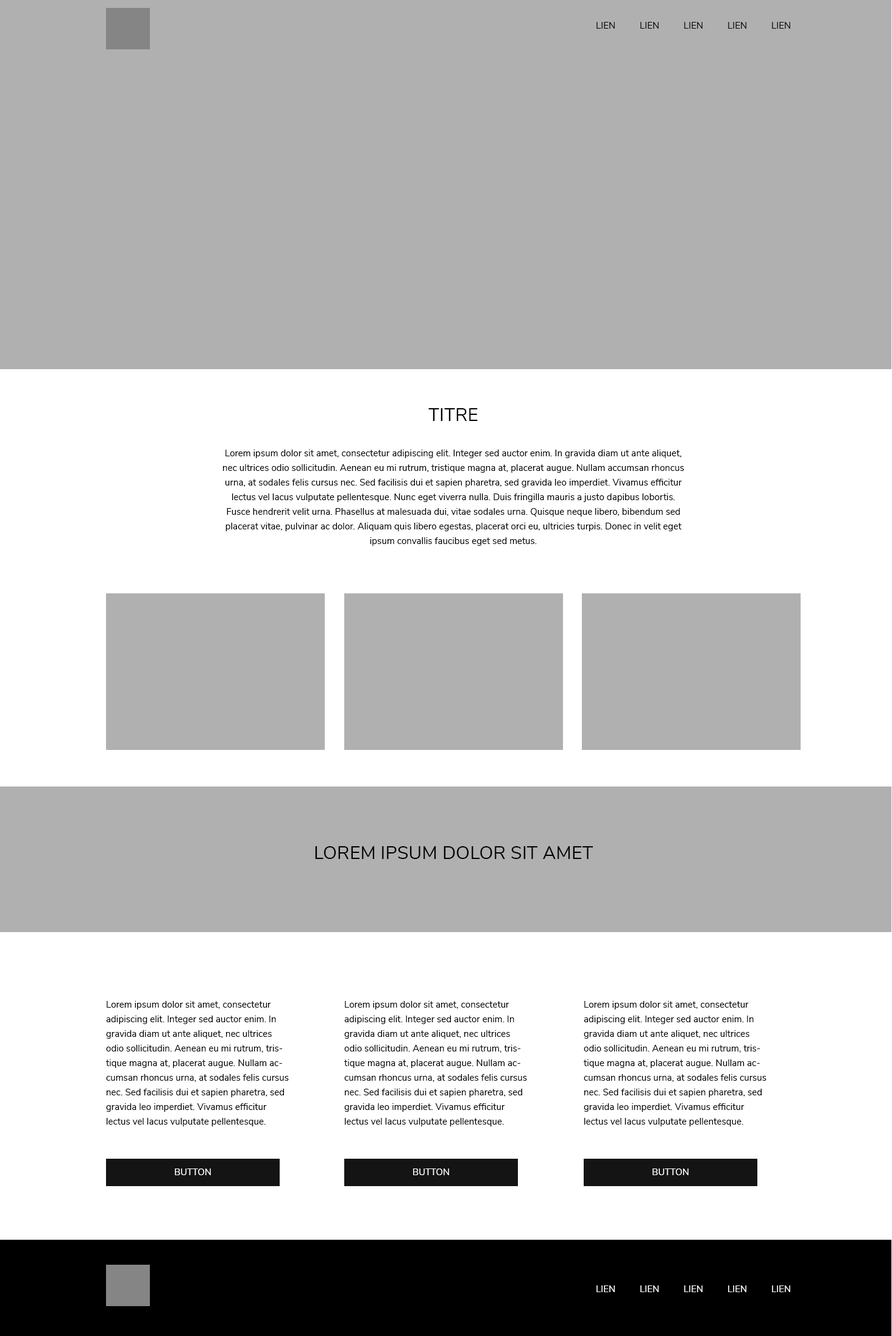
<style>
.page{position:relative;width:892px;height:1336px;background:#b0b0b0}
.page>*{position:absolute;margin:0}
.t1{font:9.1px "NunitoSans-Regular";letter-spacing:0.005em;color:#000000}
.t2{font:18.3px "NunitoSans-Regular";letter-spacing:0.005em;color:#000000}
.t3{font:9.1px/14.6px "NunitoSans-Regular";letter-spacing:0.005em;color:#000000}
.t4{font:9.3px "NunitoSans-Regular";letter-spacing:0.005em;color:#ffffff}
.t5{font:9.1px "NunitoSans-Regular";letter-spacing:0.005em;color:#ffffff}
</style>
<div class="page">
<p class="t1" style="left:597px;top:22px;width:193px;height:7px">LIEN   LIEN  LIEN  LIEN  LIEN</p>
<p class="t2" style="left:428px;top:408px;width:50px;height:13px">TITRE</p>
<p class="t3" style="left:223px;top:450px;width:461px;height:96px;text-align:center">Lorem ipsum dolor sit amet, consectetur adipiscing elit. Integer sed auctor enim. In gravida diam ut ante aliquet, nec ultrices odio sollicitudin. Aenean eu mi rutrum, tristique magna at, placerat augue. Nullam accumsan rhoncus urna, at sodales felis cursus nec. Sed facilisis dui et sapien pharetra, sed gravida leo imperdiet. Vivamus efficitur lectus vel lacus vulputate pellentesque. Nunc eget viverra nulla. Duis fringilla mauris a justo dapibus lobortis. Fusce hendrerit velit urna. Phasellus at malesuada dui, vitae sodales urna. Quisque neque libero, bibendum sed placerat vitae, pulvinar ac dolor. Aliquam quis libero egestas, placerat orci eu, ultricies turpis. Donec in velit eget ipsum convallis faucibus eget sed metus.</p>
<p class="t2" style="left:315px;top:847px;width:279px;height:12px">LOREM IPSUM DOLOR SIT AMET</p>
<p class="t3" style="left:106px;top:1001px;width:183px;height:126px">Lorem ipsum dolor sit amet, consectetur adipiscing elit. Integer sed auctor enim. In gravida diam ut ante aliquet, nec ultrices odio sollicitudin. Aenean eu mi rutrum, tristique magna at, placerat augue. Nullam accumsan rhoncus urna, at sodales felis cursus nec. Sed facilisis dui et sapien pharetra, sed gravida leo imperdiet. Vivamus efficitur lectus vel lacus vulputate pellentesque.</p>
<p class="t3" style="left:344px;top:1001px;width:183px;height:126px">Lorem ipsum dolor sit amet, consectetur adipiscing elit. Integer sed auctor enim. In gravida diam ut ante aliquet, nec ultrices odio sollicitudin. Aenean eu mi rutrum, tristique magna at, placerat augue. Nullam accumsan rhoncus urna, at sodales felis cursus nec. Sed facilisis dui et sapien pharetra, sed gravida leo imperdiet. Vivamus efficitur lectus vel lacus vulputate pellentesque.</p>
<p class="t3" style="left:584px;top:1001px;width:183px;height:126px">Lorem ipsum dolor sit amet, consectetur adipiscing elit. Integer sed auctor enim. In gravida diam ut ante aliquet, nec ultrices odio sollicitudin. Aenean eu mi rutrum, tristique magna at, placerat augue. Nullam accumsan rhoncus urna, at sodales felis cursus nec. Sed facilisis dui et sapien pharetra, sed gravida leo imperdiet. Vivamus efficitur lectus vel lacus vulputate pellentesque.</p>
<p class="t4" style="left:175px;top:1169px;width:36px;height:7px">BUTTON</p>
<p class="t4" style="left:413px;top:1169px;width:36px;height:7px">BUTTON</p>
<p class="t4" style="left:653px;top:1169px;width:36px;height:7px">BUTTON</p>
<p class="t5" style="left:597px;top:1286px;width:193px;height:7px">LIEN   LIEN  LIEN  LIEN  LIEN</p>
</div>
